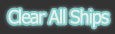
<style>
.page{position:relative;width:115px;height:34px;background:#333333}
.page>*{position:absolute;margin:0}
.t1{font:18px "Meiryo";letter-spacing:-0.08em;color:#e7eee6;font-weight:bold;scale:0.9 1}
</style>
<div class="page">
<p class="t1" style="left:8px;top:9px;width:101px;height:19px">Clear All Ships</p>
</div>
